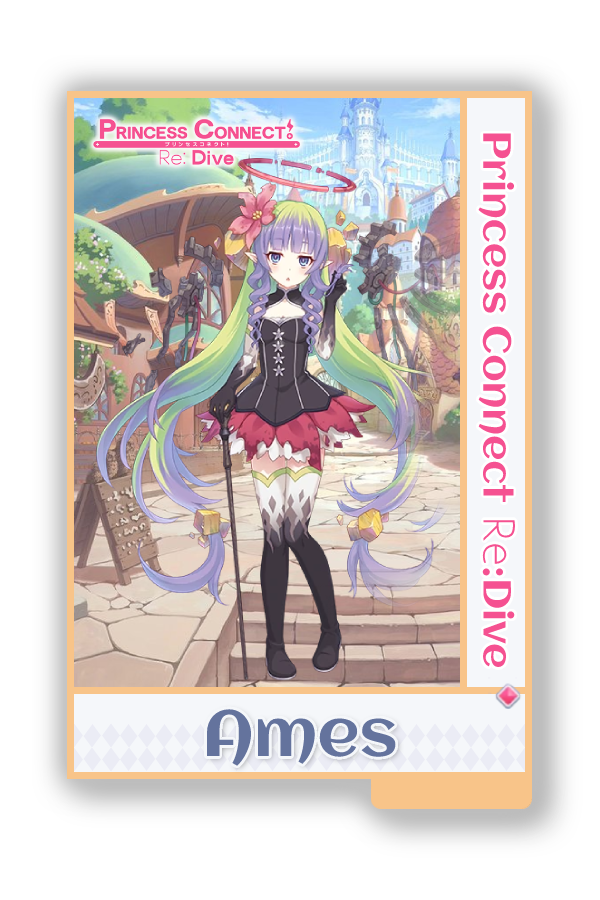
<style>
.page{position:relative;width:600px;height:900px;background:#ffffff}
.page>*{position:absolute;margin:0}
.t1{font:39px "Aclonica-Regular";color:#f55191}
.t2{font:39px "AaarghNormal";color:#f55191}
.t3{font:65px "Aclonica-Regular";color:#64739d}
</style>
<div class="page">
<p class="t1" style="left:478px;top:133px;width:38px;height:534px;rotate:90deg">Princess Connect <span class="t2">Re</span>:Dive</p>
<p class="t3" style="left:206px;top:709px;width:190px;height:57px">Ames</p>
</div>
